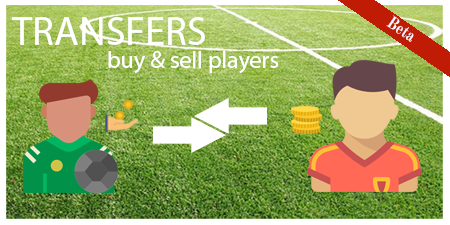
<style>
.page{position:relative;width:450px;height:225px}
.page>*{position:absolute;margin:0}
.t1{font:40.5px "MyriadHebrew-Regular";color:#ffffff}
.t2{font:17px "OldStandardTT-Bold";color:#fafbfd;scale:0.88 1}
.t3{font:24px "MyriadHebrew-Regular";color:#ffffff}
</style>
<div class="page">
<p class="t1" style="left:11px;top:17px;width:194px;height:28px">TRANSFERS</p>
<p class="t2" style="left:386px;top:15px;width:28px;height:27px;rotate:34deg">Beta</p>
<p class="t3" style="left:108px;top:51px;width:171px;height:23px">buy &amp; sell players</p>
</div>
